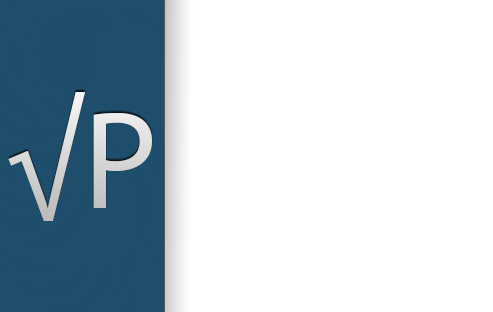
<style>
.page{position:relative;width:493px;height:312px;background:#ffffff}
.page>*{position:absolute;margin:0}
.t1{font:140px "MyriadPro-Regular";color:#d7d7d7}
</style>
<div class="page">
<p class="t1" style="left:8px;top:92px;width:144px;height:129px">√P</p>
</div>
